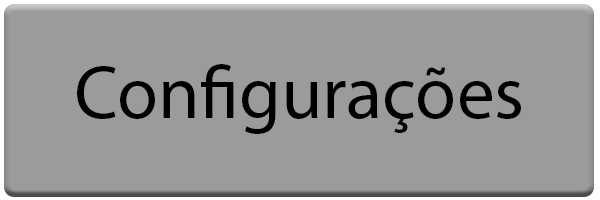
<style>
.page{position:relative;width:600px;height:200px;background:#9b9b9b}
.page>*{position:absolute;margin:0}
.t1{font:75px "MyriadPro-Regular";color:#000000}
</style>
<div class="page">
<p class="t1" style="left:77px;top:64px;width:444px;height:70px">Configurações</p>
</div>
